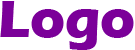
<style>
.page{position:relative;width:135px;height:50px;background:#ffffff}
.page>*{position:absolute;margin:0}
.t1{font:54px "ErasITC-Bold";color:#7b0099}
</style>
<div class="page">
<p class="t1" style="left:0px;top:1px;width:134px;height:49px">Logo</p>
</div>
